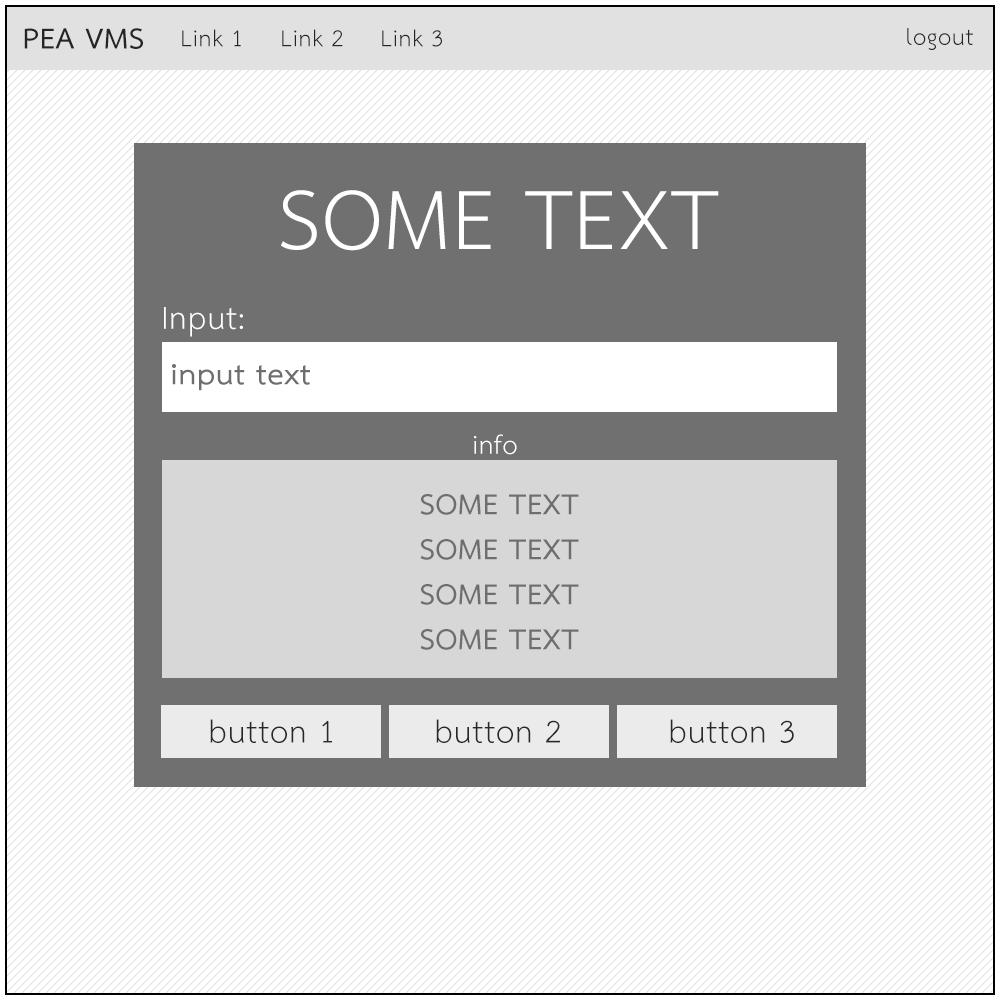
<style>
.page{position:relative;width:1000px;height:1000px;background:#ffffff}
.page>*{position:absolute;margin:0}
.t1{font:41.7px "THSarabunNew-Bold";letter-spacing:0.02em;color:#252525}
.t2{font:33.3px "THSarabunNew";letter-spacing:0.02em;color:#252525}
.t3{font:120.8px "THSarabunNew";letter-spacing:0.02em;color:#ffffff}
.t4{font:45.8px "THSarabunNew";letter-spacing:0.02em;color:#ffffff}
.t5{font:41.7px "THSarabunNew-Bold";letter-spacing:0.02em;color:#6e6e6e}
.t6{font:37.5px "THSarabunNew";letter-spacing:0.02em;color:#ffffff}
.t7{font:45.8px "THSarabunNew";letter-spacing:0.02em;color:#282828}
</style>
<div class="page">
<p class="t1" style="left:24px;top:28px;width:119px;height:21px">PEA VMS</p>
<p class="t2" style="left:182px;top:29px;width:59px;height:18px">Link 1</p>
<p class="t2" style="left:282px;top:29px;width:61px;height:18px">Link 2</p>
<p class="t2" style="left:382px;top:29px;width:60px;height:18px">Link 3</p>
<p class="t2" style="left:907px;top:28px;width:66px;height:22px">logout</p>
<p class="t3" style="left:281px;top:190px;width:438px;height:61px">SOME TEXT</p>
<p class="t4" style="left:164px;top:307px;width:79px;height:30px">Input:</p>
<p class="t5" style="left:172px;top:364px;width:138px;height:27px">input text</p>
<p class="t6" style="left:474px;top:434px;width:43px;height:21px">info</p>
<p class="t5" style="left:420px;top:494px;width:159px;height:21px">SOME TEXT</p>
<p class="t5" style="left:420px;top:539px;width:159px;height:21px">SOME TEXT</p>
<p class="t5" style="left:420px;top:584px;width:159px;height:21px">SOME TEXT</p>
<p class="t5" style="left:420px;top:629px;width:159px;height:21px">SOME TEXT</p>
<p class="t7" style="left:210px;top:719px;width:122px;height:24px">button 1</p>
<p class="t7" style="left:436px;top:719px;width:124px;height:24px">button 2</p>
<p class="t7" style="left:670px;top:719px;width:124px;height:24px">button 3</p>
</div>
